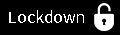
<style>
.page{position:relative;width:120px;height:35px;background:#000000}
.page>*{position:absolute;margin:0}
.t1{font:16px "TaipeiSansTCBeta-Regular";color:#ffffff}
</style>
<div class="page">
<p class="t1" style="left:9px;top:10px;width:75px;height:13px">Lockdown</p>
</div>
